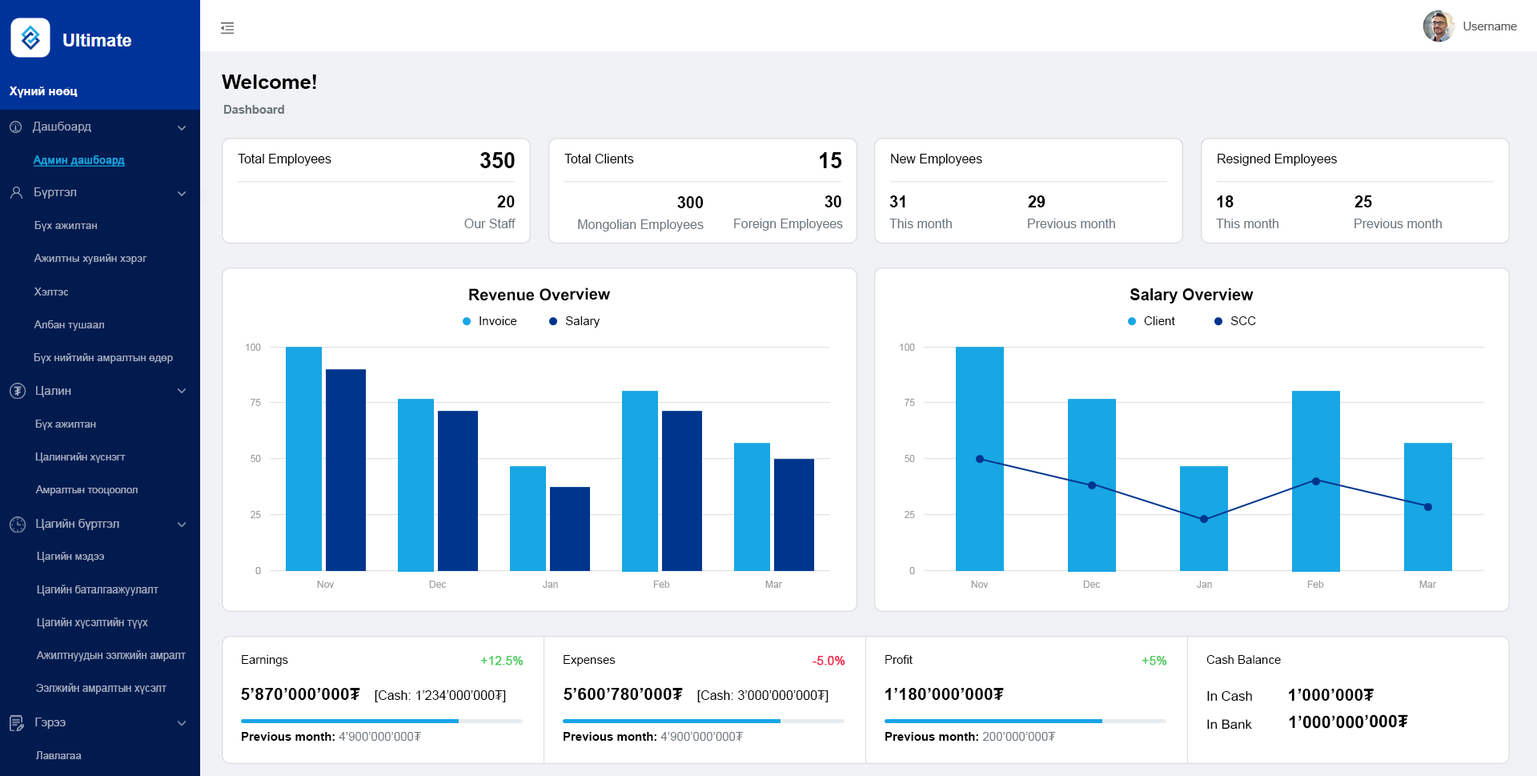
<style>
.page{position:relative;width:1537px;height:776px;background:#ffffff}
.page>*{position:absolute;margin:0}
.t1{font:11.7px "ArialMT";color:#595959}
.t2{font:20.3px "Arial-BoldMT";color:#000000}
.t3{font:11.7px "Arial-BoldMT";color:#ffffff}
.t4{font:11.7px "Arial-BoldMT";color:#6b747b}
.t5{font:11.7px "ArialMT";color:#a3acc0}
.t6{font:10.7px "ArialMT";color:#18a6e4;font-weight:bold;text-decoration:underline}
.t7{font:12.8px "ArialMT";color:#000000}
.t8{font:21.3px "Arial-BoldMT";color:#000000}
.t9{font:15.9px "Arial-BoldMT";color:#000000}
.t10{font:10.7px "ArialMT";color:#a3acc0}
.t11{font:13px "ArialMT";color:#6b747b}
.t12{font:16.2px "Arial-BoldMT";color:#000000}
.t13{font:12.2px "ArialMT";color:#000000}
.t14{font:12px "ArialMT";color:#000000}
.t15{font:9.6px "ArialMT";color:#9e9e9e}
.t16{font:10.7px "ArialMT";color:#a3acc0;scale:0.97 1}
.t17{font:10.7px "ArialMT";color:#a3acc0;scale:0.95 1}
.t18{font:9.5px "ArialMT";color:#9e9e9e;scale:1.06 1}
.t19{font:10.8px "ArialMT";color:#a3acc0;scale:0.97 1}
.t20{font:11.7px "ArialMT";color:#000000}
.t21{font:11.7px "ArialMT";color:#55ce63;font-weight:bold}
.t22{font:11.7px "ArialMT";color:#f62d51;font-weight:bold}
.t23{font:10.8px "ArialMT";color:#a3acc0}
.t24{font:17.1px "Arial-BoldMT";color:#000000}
.t25{font:12.8px "ArialMT";color:#000000;scale:1.05 1}
.t26{font:16.9px "Arial-BoldMT";color:#000000}
.t27{font:11.7px "Arial-BoldMT";color:#000000}
.t28{font:11.7px "ArialMT";color:#6b747b}
</style>
<div class="page">
<p class="t1" style="left:1463px;top:22px;width:54px;height:8px">Username</p>
<p class="t2" style="left:222px;top:74px;width:94px;height:15px">Welcome!</p>
<p class="t3" style="left:10px;top:86px;width:68px;height:12px">Хүний нөөц</p>
<p class="t4" style="left:224px;top:105px;width:60px;height:9px">Dashboard</p>
<p class="t5" style="left:32px;top:122px;width:59px;height:11px">Дашбоард</p>
<p class="t6" style="left:33px;top:155px;width:92px;height:12px">Админ дашбоард</p>
<p class="t7" style="left:238px;top:154px;width:93px;height:12px">Total Employees</p>
<p class="t8" style="left:480px;top:152px;width:35px;height:16px">350</p>
<p class="t7" style="left:564px;top:154px;width:70px;height:9px">Total Clients</p>
<p class="t8" style="left:820px;top:152px;width:22px;height:16px">15</p>
<p class="t7" style="left:891px;top:154px;width:91px;height:12px">New Employees</p>
<p class="t7" style="left:1218px;top:154px;width:119px;height:12px">Resigned Employees</p>
<p class="t5" style="left:34px;top:187px;width:43px;height:12px">Бүртгэл</p>
<p class="t9" style="left:497px;top:195px;width:18px;height:12px">20</p>
<p class="t9" style="left:677px;top:196px;width:27px;height:12px">300</p>
<p class="t9" style="left:825px;top:195px;width:16px;height:12px">30</p>
<p class="t9" style="left:889px;top:195px;width:16px;height:12px">31</p>
<p class="t9" style="left:1028px;top:195px;width:18px;height:12px">29</p>
<p class="t9" style="left:1217px;top:195px;width:17px;height:12px">18</p>
<p class="t9" style="left:1355px;top:195px;width:17px;height:12px">25</p>
<p class="t10" style="left:34px;top:221px;width:63px;height:10px">Бүх ажилтан</p>
<p class="t11" style="left:464px;top:219px;width:52px;height:9px">Our Staff</p>
<p class="t11" style="left:578px;top:219px;width:126px;height:12px">Mongolian Employees</p>
<p class="t11" style="left:734px;top:219px;width:109px;height:12px">Foreign Employees</p>
<p class="t11" style="left:889px;top:219px;width:63px;height:9px">This month</p>
<p class="t11" style="left:1028px;top:219px;width:87px;height:9px">Previous month</p>
<p class="t11" style="left:1216px;top:219px;width:63px;height:9px">This month</p>
<p class="t11" style="left:1355px;top:219px;width:87px;height:9px">Previous month</p>
<p class="t10" style="left:34px;top:254px;width:113px;height:10px">Ажилтны хувийн хэрэг</p>
<p class="t10" style="left:34px;top:287px;width:34px;height:8px">Хэлтэс</p>
<p class="t12" style="left:469px;top:287px;width:142px;height:14px">Revenue Overview</p>
<p class="t12" style="left:1130px;top:288px;width:124px;height:15px">Salary Overview</p>
<p class="t13" style="left:480px;top:316px;width:37px;height:9px">Invoice</p>
<p class="t14" style="left:565px;top:316px;width:35px;height:11px">Salary</p>
<p class="t13" style="left:1144px;top:316px;width:31px;height:9px">Client</p>
<p class="t14" style="left:1230px;top:316px;width:26px;height:9px">SCC</p>
<p class="t10" style="left:34px;top:320px;width:70px;height:11px">Албан тушаал</p>
<p class="t10" style="left:34px;top:353px;width:139px;height:10px">Бүх нийтийн амралтын өдөр</p>
<p class="t15" style="left:246px;top:343px;width:15px;height:8px">100</p>
<p class="t15" style="left:900px;top:343px;width:15px;height:8px">100</p>
<p class="t5" style="left:36px;top:386px;width:35px;height:11px">Цалин</p>
<p class="t15" style="left:251px;top:399px;width:10px;height:7px">75</p>
<p class="t15" style="left:905px;top:399px;width:10px;height:7px">75</p>
<p class="t10" style="left:35px;top:420px;width:61px;height:10px">Бүх ажилтан</p>
<p class="t16" style="left:35px;top:452px;width:91px;height:11px">Цалингийн хүснэгт</p>
<p class="t15" style="left:251px;top:455px;width:10px;height:7px">50</p>
<p class="t15" style="left:905px;top:455px;width:10px;height:7px">50</p>
<p class="t17" style="left:35px;top:485px;width:103px;height:11px">Амралтын тооцоолол</p>
<p class="t5" style="left:36px;top:519px;width:83px;height:11px">Цагийн бүртгэл</p>
<p class="t15" style="left:251px;top:511px;width:10px;height:7px">25</p>
<p class="t15" style="left:905px;top:511px;width:10px;height:7px">25</p>
<p class="t10" style="left:37px;top:552px;width:67px;height:10px">Цагийн мэдээ</p>
<p class="t18" style="left:255px;top:567px;width:6px;height:7px">0</p>
<p class="t18" style="left:909px;top:567px;width:6px;height:7px">0</p>
<p class="t15" style="left:317px;top:580px;width:18px;height:8px">Nov</p>
<p class="t15" style="left:429px;top:580px;width:17px;height:8px">Dec</p>
<p class="t15" style="left:543px;top:580px;width:15px;height:8px">Jan</p>
<p class="t15" style="left:653px;top:580px;width:17px;height:8px">Feb</p>
<p class="t15" style="left:765px;top:580px;width:17px;height:8px">Mar</p>
<p class="t15" style="left:971px;top:580px;width:18px;height:8px">Nov</p>
<p class="t15" style="left:1083px;top:580px;width:17px;height:8px">Dec</p>
<p class="t15" style="left:1197px;top:580px;width:15px;height:8px">Jan</p>
<p class="t15" style="left:1307px;top:580px;width:17px;height:8px">Feb</p>
<p class="t15" style="left:1419px;top:580px;width:17px;height:8px">Mar</p>
<p class="t19" style="left:37px;top:584px;width:122px;height:12px">Цагийн баталгаажуулалт</p>
<p class="t19" style="left:37px;top:617px;width:111px;height:11px">Цагийн хүсэлтийн түүх</p>
<p class="t19" style="left:36px;top:650px;width:150px;height:11px">Ажилтнуудын ээлжийн амралт</p>
<p class="t20" style="left:242px;top:655px;width:46px;height:11px">Earnings</p>
<p class="t21" style="left:480px;top:656px;width:44px;height:9px">+12.5%</p>
<p class="t20" style="left:564px;top:655px;width:52px;height:11px">Expenses</p>
<p class="t22" style="left:813px;top:656px;width:32px;height:9px">-5.0%</p>
<p class="t20" style="left:885px;top:655px;width:28px;height:9px">Profit</p>
<p class="t21" style="left:1142px;top:656px;width:25px;height:9px">+5%</p>
<p class="t20" style="left:1206px;top:655px;width:75px;height:9px">Cash Balance</p>
<p class="t23" style="left:36px;top:683px;width:131px;height:11px">Ээлжийн амралтын хүсэлт</p>
<p class="t7" style="left:241px;top:688px;width:265px;height:14px"><span class="t24">5’870’000’000₮   </span>[Cash: 1’234’000’000₮]</p>
<p class="t7" style="left:564px;top:688px;width:265px;height:14px"><span class="t24">5’600’780’000₮   </span>[Cash: 3’000’000’000₮]</p>
<p class="t24" style="left:885px;top:688px;width:119px;height:12px">1’180’000’000₮</p>
<p class="t24" style="left:1289px;top:688px;width:85px;height:13px">1’000’000₮</p>
<p class="t25" style="left:1207px;top:691px;width:45px;height:10px">In Cash</p>
<p class="t5" style="left:35px;top:717px;width:31px;height:12px">Гэрээ</p>
<p class="t25" style="left:1207px;top:719px;width:45px;height:10px">In Bank</p>
<p class="t26" style="left:1289px;top:714px;width:119px;height:15px">1’000’000’000₮</p>
<p class="t27" style="left:242px;top:732px;width:179px;height:9px">Previous month: <span class="t28">4’900’000’000₮</span></p>
<p class="t27" style="left:564px;top:732px;width:179px;height:9px">Previous month: <span class="t28">4’900’000’000₮</span></p>
<p class="t27" style="left:885px;top:732px;width:171px;height:9px">Previous month: <span class="t28">200’000’000₮</span></p>
<p class="t10" style="left:36px;top:751px;width:46px;height:8px">Лавлагаа</p>
</div>
